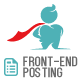
<style>
.page{position:relative;width:80px;height:80px;background:#ffffff}
.page>*{position:absolute;margin:0}
.t1{font:14px/11px "Kenzo";letter-spacing:0.025em;color:#6a6a6a}
</style>
<div class="page">
<p class="t1" style="left:23px;top:56px;width:55px;height:22px">front-end<br>posting</p>
</div>
